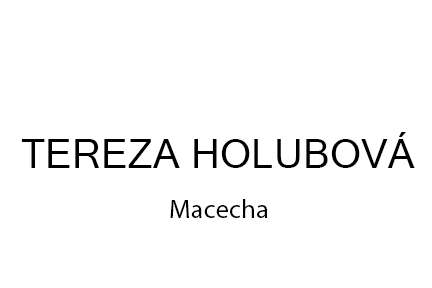
<style>
.page{position:relative;width:432px;height:288px;background:#ffffff}
.page>*{position:absolute;margin:0}
.t1{font:40.3px "MicrosoftSansSerif";color:#000000}
.t2{font:26.9px "MyriadPro-Regular";color:#000000}
</style>
<div class="page">
<p class="t1" style="left:21px;top:132px;width:394px;height:36px">TEREZA HOLUBOVÁ</p>
<p class="t2" style="left:170px;top:199px;width:98px;height:19px">Macecha</p>
</div>
